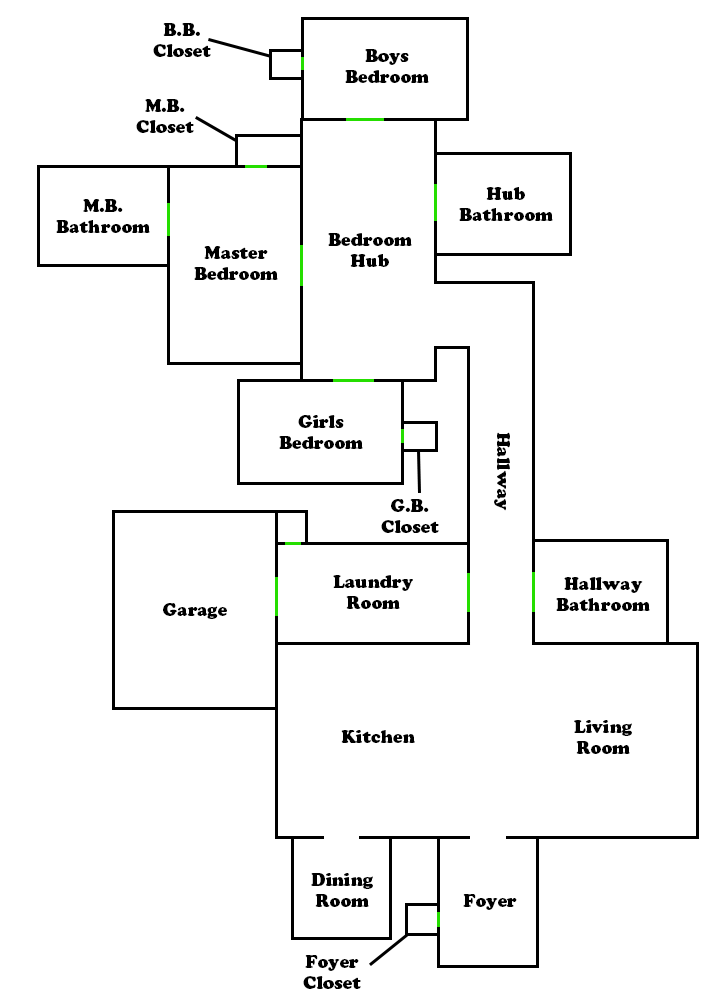
<style>
.page{position:relative;width:718px;height:994px;background:#ffffff}
.page>*{position:absolute;margin:0}
.t1{font:17.3px "CooperBlackStd";color:#000000}
</style>
<div class="page">
<p class="t1" style="left:153px;top:23px;width:58px;height:34px;text-align:center">B.B.<br>Closet</p>
<p class="t1" style="left:345px;top:49px;width:84px;height:34px;text-align:center">Boys<br>Bedroom</p>
<p class="t1" style="left:136px;top:99px;width:58px;height:34px;text-align:center">M.B.<br>Closet</p>
<p class="t1" style="left:459px;top:187px;width:94px;height:34px;text-align:center">Hub<br>Bathroom</p>
<p class="t1" style="left:56px;top:199px;width:94px;height:34px;text-align:center">M.B.<br>Bathroom</p>
<p class="t1" style="left:328px;top:233px;width:84px;height:34px;text-align:center">Bedroom<br>Hub</p>
<p class="t1" style="left:194px;top:246px;width:84px;height:34px;text-align:center">Master<br>Bedroom</p>
<p class="t1" style="left:279px;top:415px;width:84px;height:34px;text-align:center">Girls<br>Bedroom</p>
<p class="t1" style="left:494px;top:432px;width:16px;height:79px;rotate:90deg">Hallway</p>
<p class="t1" style="left:381px;top:499px;width:58px;height:34px;text-align:center">G.B.<br>Closet</p>
<p class="t1" style="left:333px;top:575px;width:80px;height:34px;text-align:center">Laundry<br>Room</p>
<p class="t1" style="left:556px;top:577px;width:94px;height:34px;text-align:center">Hallway<br>Bathroom</p>
<p class="t1" style="left:163px;top:603px;width:64px;height:16px">Garage</p>
<p class="t1" style="left:574px;top:720px;width:58px;height:34px;text-align:center">Living<br>Room</p>
<p class="t1" style="left:341px;top:730px;width:74px;height:13px">Kitchen</p>
<p class="t1" style="left:311px;top:873px;width:62px;height:34px;text-align:center">Dining<br>Room</p>
<p class="t1" style="left:463px;top:894px;width:54px;height:16px">Foyer</p>
<p class="t1" style="left:303px;top:955px;width:58px;height:34px;text-align:center">Foyer<br>Closet</p>
</div>
